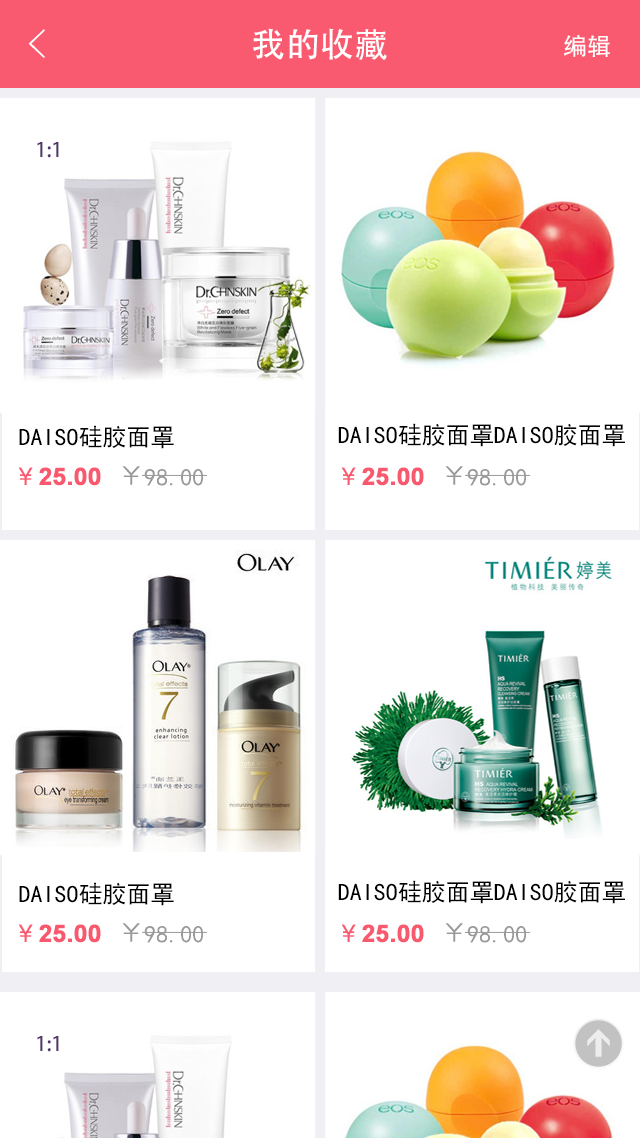
<style>
.page{position:relative;width:640px;height:1138px;background:#ffffff}
.page>*{position:absolute;margin:0}
.t1{font:40px "FZYXJW--GB1-0";color:#ffffff}
.t2{font:34px "AdobeHeitiStd-Regular";color:#ffffff}
.t3{font:24px "AdobeHeitiStd-Regular";color:#ffffff}
.t4{font:20px "AdobeHeitiStd-Regular";color:#50346d}
.t5{font:24px "SimHei";color:#000000}
.t6{font:24px "FZZDXJW--GB1-0";color:#f95a70;font-weight:bold}
.t7{font:24px "Arial-BoldMT";color:#f8596f;font-weight:bold}
.t8{font:28px "SimHei";color:#999999}
.t9{font:24px "SimHei";color:#999999}
</style>
<div class="page">
<p class="t1" style="left:28px;top:29px;width:17px;height:29px">&lt;</p>
<p class="t2" style="left:253px;top:28px;width:134px;height:32px">我的收藏</p>
<p class="t2" style="left:253px;top:28px;width:134px;height:32px">我的收藏</p>
<p class="t3" style="left:563px;top:35px;width:47px;height:22px">编辑</p>
<p class="t4" style="left:37px;top:142px;width:22px;height:16px">1:1</p>
<p class="t5" style="left:19px;top:425px;width:155px;height:24px">DAISO硅胶面罩</p>
<p class="t5" style="left:338px;top:423px;width:287px;height:24px">DAISO硅胶面罩DAISO胶面罩</p>
<p class="t6" style="left:18px;top:467px;width:15px;height:18px">￥</p>
<p class="t7" style="left:39px;top:467px;width:62px;height:19px">25.00</p>
<p class="t8" style="left:122px;top:466px;width:18px;height:19px">￥</p>
<p class="t9" style="left:144px;top:469px;width:59px;height:17px">98.00</p>
<p class="t6" style="left:341px;top:467px;width:15px;height:18px">￥</p>
<p class="t7" style="left:362px;top:467px;width:62px;height:19px">25.00</p>
<p class="t8" style="left:445px;top:466px;width:18px;height:19px">￥</p>
<p class="t9" style="left:467px;top:469px;width:59px;height:17px">98.00</p>
<p class="t5" style="left:338px;top:880px;width:287px;height:24px">DAISO硅胶面罩DAISO胶面罩</p>
<p class="t5" style="left:19px;top:882px;width:155px;height:24px">DAISO硅胶面罩</p>
<p class="t6" style="left:18px;top:924px;width:15px;height:18px">￥</p>
<p class="t7" style="left:39px;top:924px;width:62px;height:19px">25.00</p>
<p class="t8" style="left:122px;top:923px;width:18px;height:19px">￥</p>
<p class="t9" style="left:144px;top:926px;width:59px;height:17px">98.00</p>
<p class="t6" style="left:341px;top:924px;width:15px;height:18px">￥</p>
<p class="t7" style="left:362px;top:924px;width:62px;height:19px">25.00</p>
<p class="t8" style="left:445px;top:923px;width:18px;height:19px">￥</p>
<p class="t9" style="left:467px;top:926px;width:59px;height:17px">98.00</p>
<p class="t4" style="left:37px;top:1036px;width:22px;height:16px">1:1</p>
</div>
